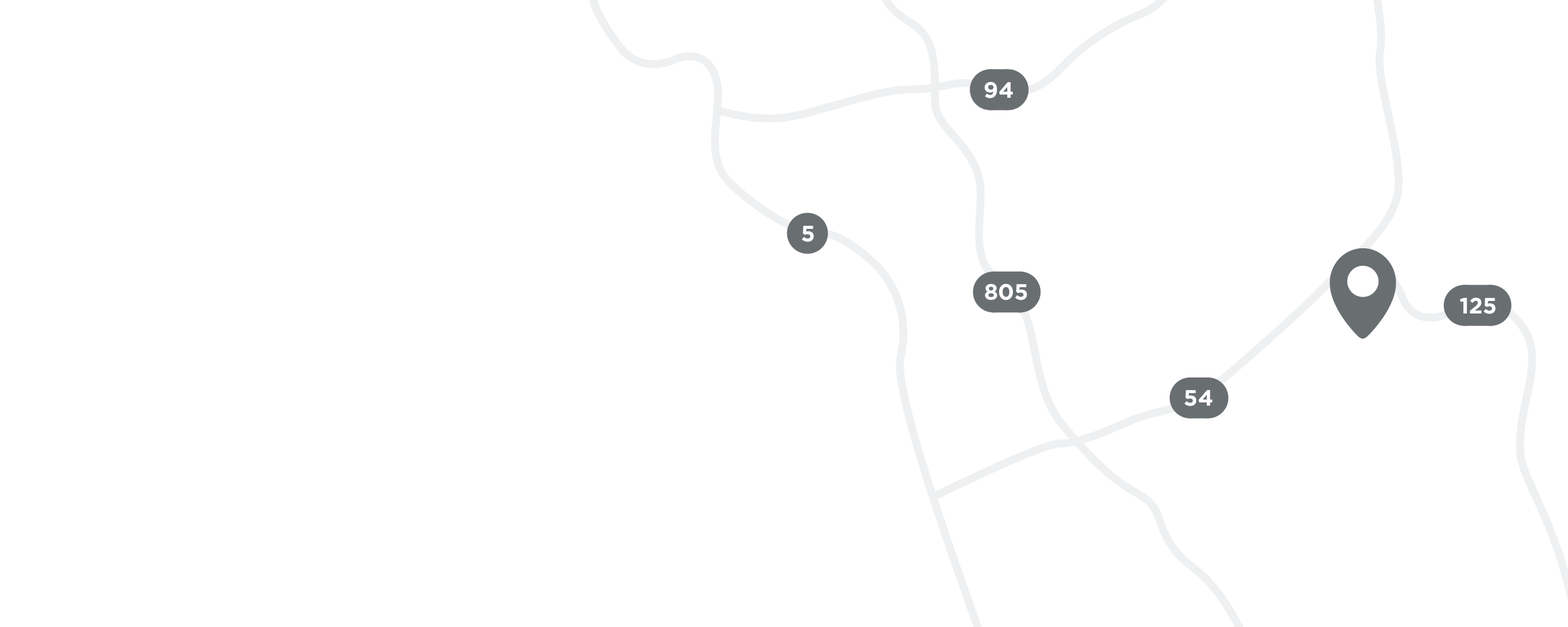
<style>
.page{position:relative;width:1568px;height:627px;background:#ffffff}
.page>*{position:absolute;margin:0}
.t1{font:22.3px "Gotham-Bold";color:#ffffff}
.t2{font:90.2px "SSPika";color:#696e71}
</style>
<div class="page">
<p class="t1" style="left:985px;top:82px;width:28px;height:16px">94</p>
<p class="t1" style="left:802px;top:226px;width:12px;height:16px">5</p>
<p class="t2" style="left:1330px;top:248px;width:66px;height:91px">location</p>
<p class="t1" style="left:985px;top:283px;width:42px;height:17px">805</p>
<p class="t1" style="left:1459px;top:297px;width:37px;height:17px">125</p>
<p class="t1" style="left:1184px;top:390px;width:28px;height:16px">54</p>
</div>
